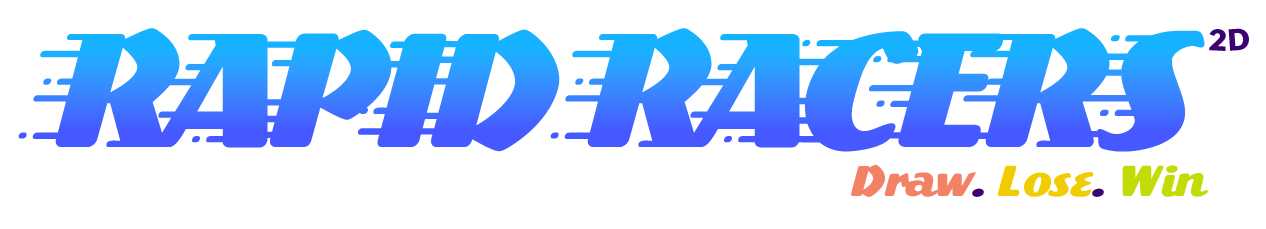
<style>
.page{position:relative;width:1266px;height:229px;background:#ffffff}
.page>*{position:absolute;margin:0}
.t1{font:150px "CCSpeedingBulletTrails-Italic";letter-spacing:-0.05em}
.t2{font:30px "GambadoSansForte";color:#3c0274}
.t3{font:40px "CCSpeedingBullet-Italic";color:#f28166}
.t4{font:40px "CCSpeedingBullet-Italic";color:#3c0274}
.t5{font:40px "CCSpeedingBullet-Italic";color:#f2cc03}
.t6{font:40px "CCSpeedingBullet-Italic";color:#c3dc08}
</style>
<div class="page">
<p class="t1" style="left:18px;top:28px;width:1187px;height:124px">RAPID RACERS</p>
<p class="t2" style="left:1209px;top:28px;width:40px;height:23px">2D</p>
<p class="t3" style="left:851px;top:164px;width:357px;height:33px">Draw<span class="t4">. </span><span class="t5">Lose</span><span class="t4">. </span><span class="t6">Win</span></p>
</div>
